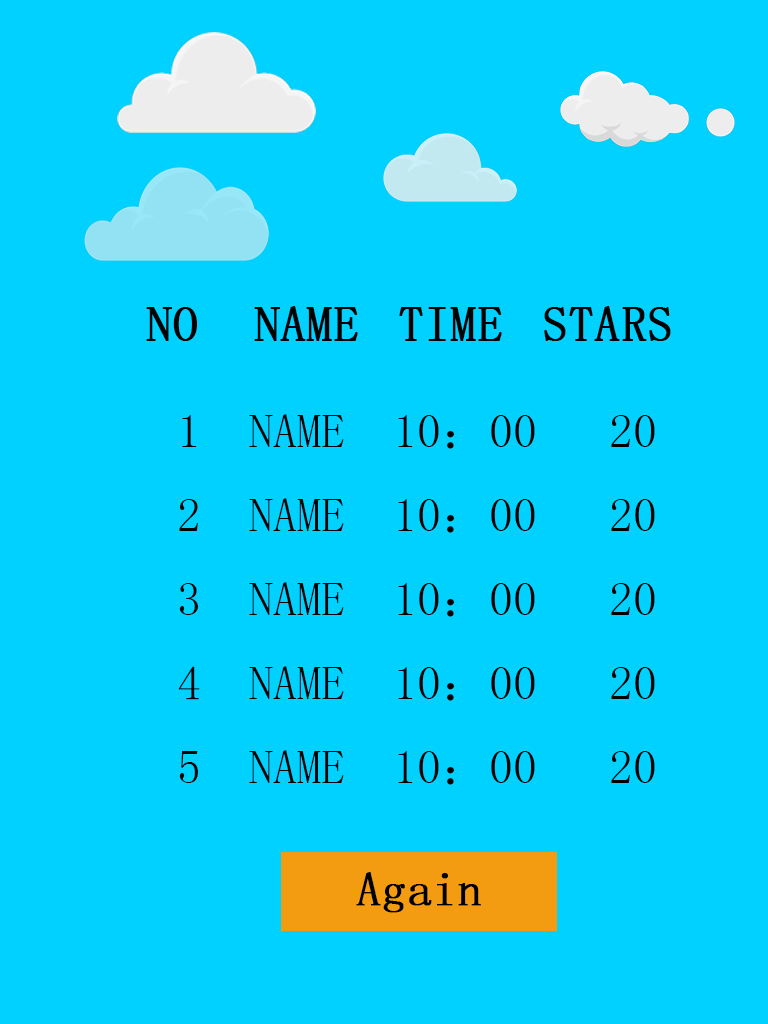
<style>
.page{position:relative;width:768px;height:1024px;background:#00d1ff}
.page>*{position:absolute;margin:0}
.t1{font:50px "SimSun";color:#000202;font-weight:bold}
.t2{font:48px "SimSun";color:#000202}
.t3{font:48px "SimSun";color:#000202;font-weight:bold}
</style>
<div class="page">
<p class="t1" style="left:146px;top:306px;width:525px;height:35px">NO  NAME  TIME  STARS</p>
<p class="t2" style="left:178px;top:414px;width:477px;height:371px">1  NAME  10：00  20<br>2  NAME  10：00  20<br>3  NAME  10：00  20<br>4  NAME  10：00  20<br>5  NAME  10：00  20</p>
<p class="t3" style="left:356px;top:872px;width:125px;height:41px">Again</p>
</div>
